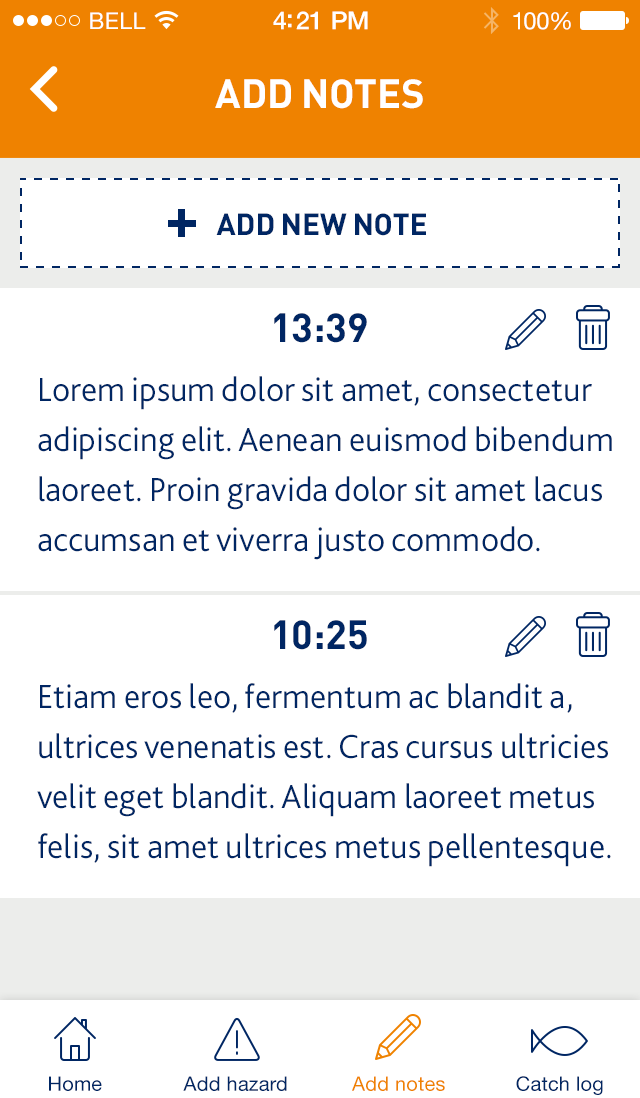
<style>
.page{position:relative;width:640px;height:1098px;background:#ffffff}
.page>*{position:absolute;margin:0}
.t1{font:23px "HelveticaNeue";letter-spacing:0.02em;color:#ffffff}
.t2{font:25px "HelveticaNeue-Medium";letter-spacing:-0.02em;color:#ffffff}
.t3{font:24px "HelveticaNeue";letter-spacing:-0.02em;color:#ffffff}
.t4{font:40px "DIN-Bold";color:#ffffff;text-transform:uppercase}
.t5{font:30px "DIN-Bold";color:#002663;text-transform:uppercase}
.t6{font:40px "DIN-Bold";color:#002663;text-transform:uppercase}
.t7{font:35px/50px "Bliss2-Light";color:#002663}
.t8{font:20px "HelveticaNeue";letter-spacing:0.01em;color:#002663}
.t9{font:20px "HelveticaNeue";letter-spacing:0.01em;color:#ef8200}
</style>
<div class="page">
<p class="t1" style="left:90px;top:12px;width:56px;height:17px">BELL</p>
<p class="t2" style="left:273px;top:11px;width:95px;height:19px">4:21 PM</p>
<p class="t3" style="left:513px;top:12px;width:58px;height:18px">100%</p>
<p class="t4" style="left:215px;top:79px;width:208px;height:30px">add notes</p>
<p class="t5" style="left:216px;top:213px;width:210px;height:23px">Add new note</p>
<p class="t6" style="left:274px;top:313px;width:93px;height:30px">13:39</p>
<p class="t7" style="left:38px;top:376px;width:574px;height:184px">Lorem ipsum dolor sit amet, consectetur adipiscing elit. Aenean euismod bibendum laoreet. Proin gravida dolor sit amet lacus accumsan et viverra justo commodo.</p>
<p class="t6" style="left:274px;top:620px;width:93px;height:30px">10:25</p>
<p class="t7" style="left:37px;top:683px;width:574px;height:184px">Etiam eros leo, fermentum ac blandit a, ultrices venenatis est. Cras cursus ultricies velit eget blandit. Aliquam laoreet metus felis, sit amet ultrices metus pellentesque.</p>
<p class="t8" style="left:49px;top:1076px;width:53px;height:15px">Home</p>
<p class="t8" style="left:183px;top:1076px;width:104px;height:15px">Add hazard</p>
<p class="t9" style="left:352px;top:1076px;width:93px;height:15px">Add notes</p>
<p class="t8" style="left:516px;top:1076px;width:87px;height:19px">Catch log</p>
</div>
